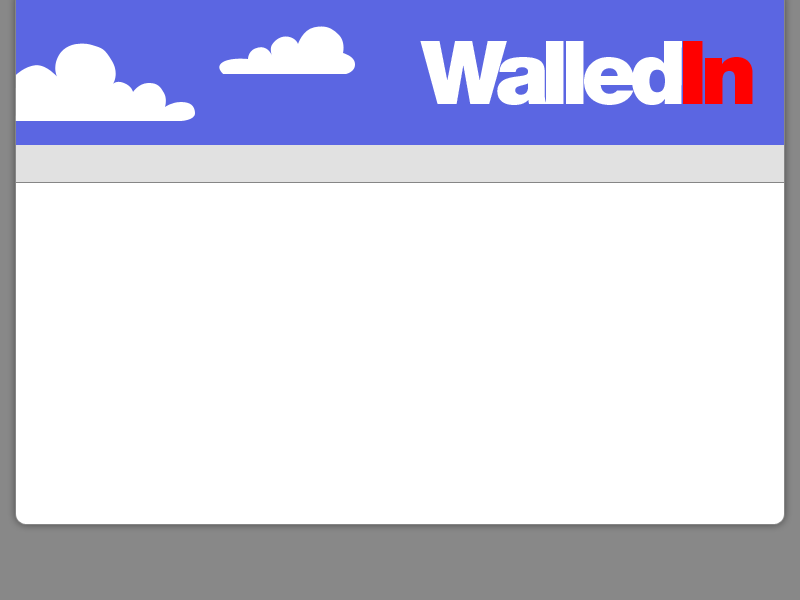
<style>
.page{position:relative;width:800px;height:600px;background:#ffffff}
.page>*{position:absolute;margin:0}
.t1{font:88.6px "HelveticaNeueLTPro-Blk";letter-spacing:-0.09em;color:#ffffff}
.t2{font:88.6px "HelveticaNeueLTPro-Blk";letter-spacing:-0.09em;color:#ff0000}
</style>
<div class="page">
<p class="t1" style="left:420px;top:41px;width:333px;height:64px">Walled<span class="t2">In</span></p>
</div>
